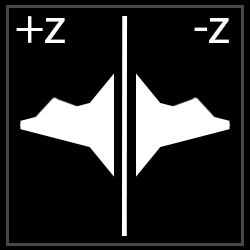
<style>
.page{position:relative;width:250px;height:250px;background:#000000}
.page>*{position:absolute;margin:0}
.t1{font:50px "MyriadPro-Regular";color:#ffffff}
</style>
<div class="page">
<p class="t1" style="left:16px;top:16px;width:213px;height:27px">+z            -z</p>
</div>
